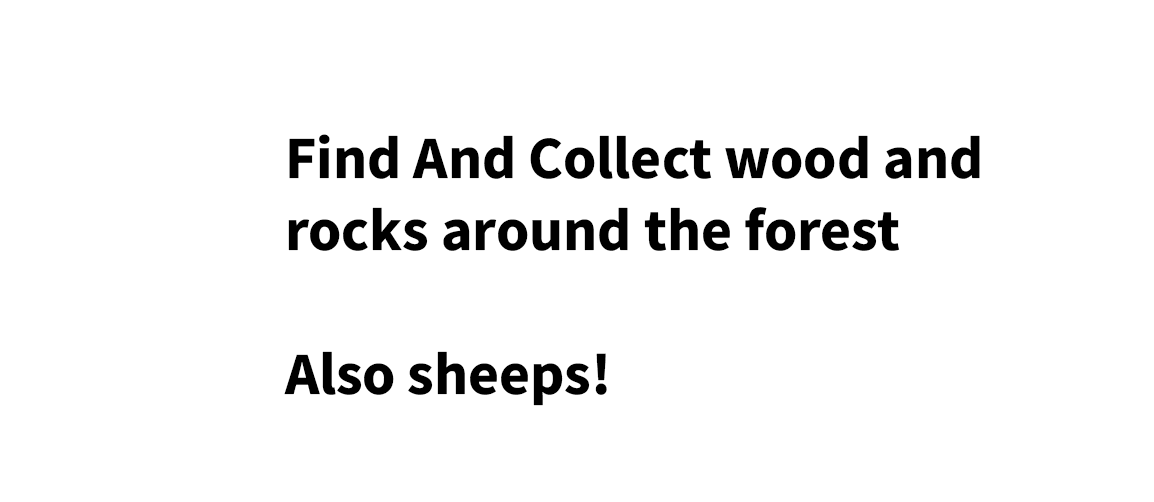
<style>
.page{position:relative;width:1154px;height:502px;background:#ffffff}
.page>*{position:absolute;margin:0}
.t1{font:60px "SourceSansRoman-Bold";color:#000000}
</style>
<div class="page">
<p class="t1" style="left:284px;top:134px;width:696px;height:272px">Find And Collect wood and <br>rocks around the forest<br><br>Also sheeps!</p>
</div>
